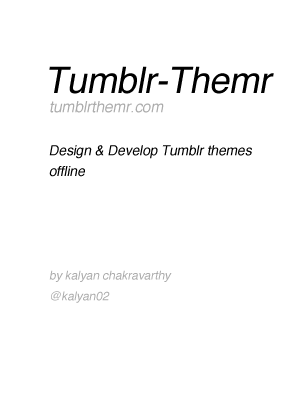
<style>
.page{position:relative;width:300px;height:400px;background:#ffffff}
.page>*{position:absolute;margin:0}
.t1{font:15.6px/19px "Helvetica";letter-spacing:-0.01em;color:#acacac;font-style:italic}
.t2{font:36.3px/36.3px "Helvetica";letter-spacing:-0.01em;color:#000000;font-style:italic}
.t3{font:36.3px/40.6px "Helvetica";letter-spacing:-0.01em;color:#000000;font-style:italic}
.t4{font:13.8px/20.8px "Helvetica";letter-spacing:-0.01em;color:#000000;font-style:italic}
.t5{font:12.1px/20.8px "Helvetica";letter-spacing:-0.01em;color:#acacac;font-style:italic}
</style>
<div class="page">
<p class="t1" style="left:49px;top:66px;width:225px;height:47px"><span class="t2">Tumblr-</span><span class="t3">Themr<br> </span>tumblrthemr.com</p>
<p class="t4" style="left:49px;top:145px;width:203px;height:32px">Design &amp; Develop Tumblr themes <br>offline</p>
<p class="t5" style="left:49px;top:270px;width:123px;height:33px">by kalyan chakravarthy<br>@kalyan02</p>
</div>
